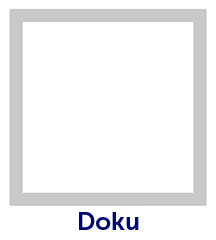
<style>
.page{position:relative;width:216px;height:240px;background:#ffffff}
.page>*{position:absolute;margin:0}
.t1{font:12px "MuseoSans-700";color:#000870}
</style>
<div class="page">
<p class="t1" style="left:79px;top:212px;width:60px;height:18px">Doku</p>
</div>
